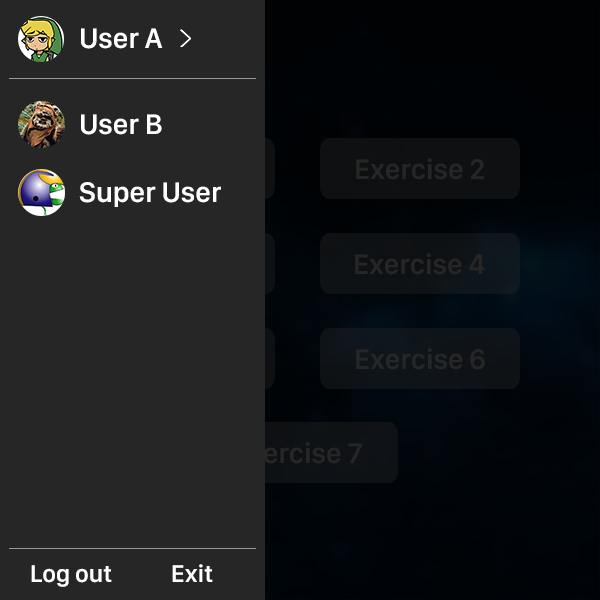
<style>
.page{position:relative;width:600px;height:600px;background:#262626}
.page>*{position:absolute;margin:0}
.t1{font:29.2px "SanFranciscoDisplay-Semibold";color:#ffffff}
.t2{font:29.2px "SanFranciscoDisplay-Semibold";color:#262626}
.t3{font:25px "SanFranciscoDisplay-Semibold";color:#ffffff}
</style>
<div class="page">
<p class="t1" style="left:81px;top:28px;width:82px;height:21px">User A</p>
<p class="t1" style="left:81px;top:114px;width:81px;height:21px">User B</p>
<p class="t2" style="left:356px;top:158px;width:128px;height:22px">Exercise 2</p>
<p class="t1" style="left:79px;top:182px;width:142px;height:25px">Super User</p>
<p class="t2" style="left:355px;top:253px;width:130px;height:22px">Exercise 4</p>
<p class="t2" style="left:356px;top:348px;width:129px;height:22px">Exercise 6</p>
<p class="t2" style="left:234px;top:442px;width:128px;height:22px">Exercise 7</p>
<p class="t3" style="left:31px;top:565px;width:81px;height:22px">Log out</p>
<p class="t3" style="left:172px;top:564px;width:41px;height:18px">Exit</p>
</div>
